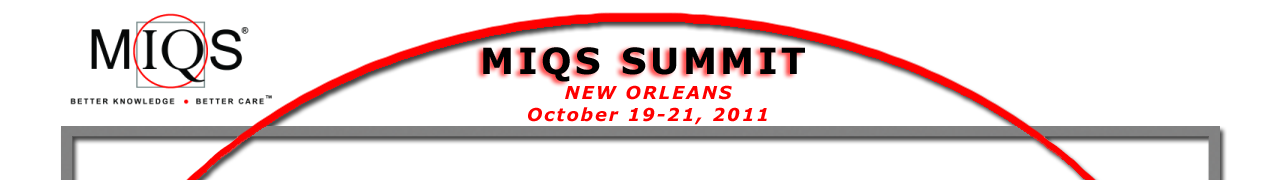
<style>
.page{position:relative;width:1280px;height:180px;background:#ffffff}
.page>*{position:absolute;margin:0}
.t1{font:36px "Verdana-Bold";letter-spacing:0.1em;color:#000000}
.t2{font:18px "Verdana-BoldItalic";letter-spacing:0.1em;color:#ff0000}
</style>
<div class="page">
<p class="t1" style="left:483px;top:47px;width:322px;height:35px">MIQS SUMMIT</p>
<p class="t2" style="left:528px;top:85px;width:239px;height:40px;text-align:center">NEW ORLEANS<br>October 19-21, 2011</p>
</div>
